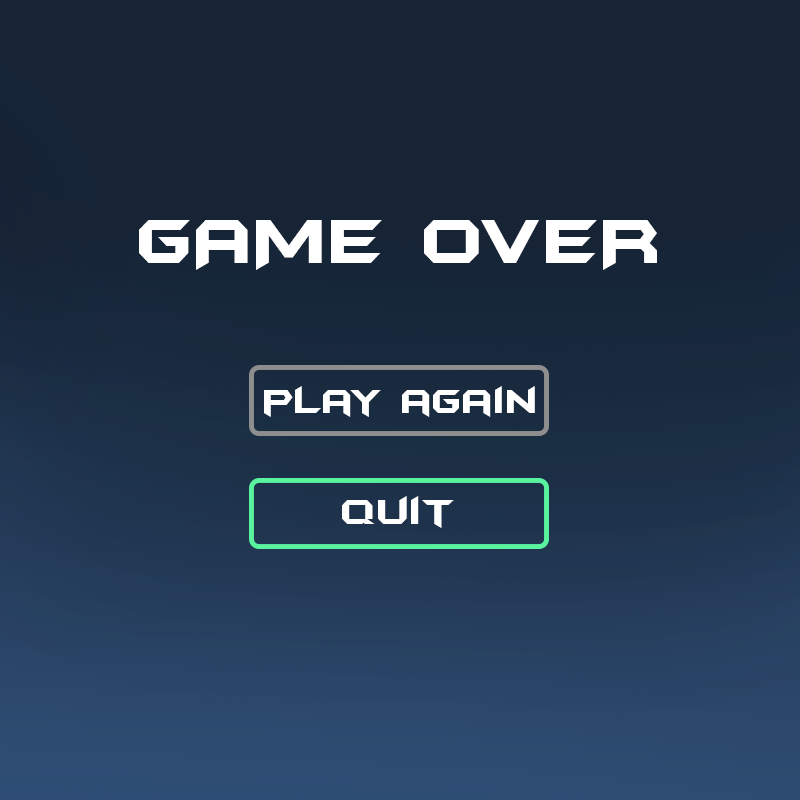
<style>
.page{position:relative;width:800px;height:800px;background:#162436}
.page>*{position:absolute;margin:0}
.t1{font:72px "BatmanForeverAlternate";color:#ffffff}
.t2{font:38px "BatmanForeverAlternate";color:#ffffff}
.t3{font:40px "BatmanForeverAlternate";color:#ffffff}
</style>
<div class="page">
<p class="t1" style="left:139px;top:220px;width:518px;height:50px">GAME OVER</p>
<p class="t2" style="left:264px;top:386px;width:271px;height:31px">play again</p>
<p class="t3" style="left:342px;top:496px;width:112px;height:32px">quit</p>
</div>
